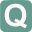
<style>
.page{position:relative;width:32px;height:32px;background:#639c8f}
.page>*{position:absolute;margin:0}
.t1{font:31px "Arial-BoldMT";color:#fff6f7;text-transform:uppercase}
</style>
<div class="page">
<p class="t1" style="left:4px;top:3px;width:23px;height:26px">q</p>
</div>
